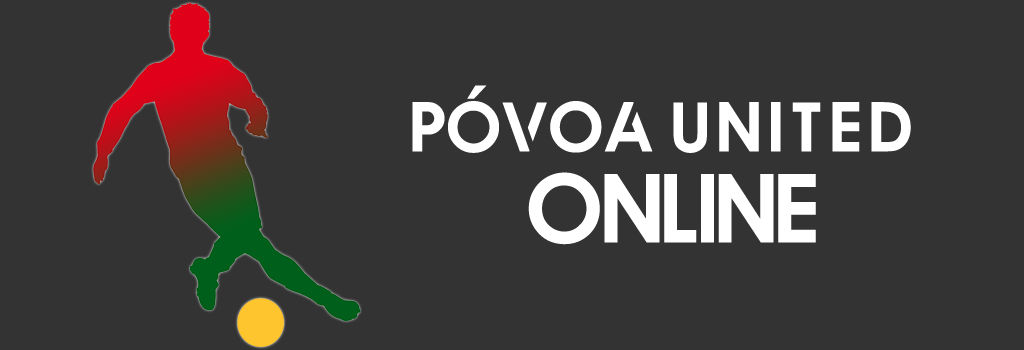
<style>
.page{position:relative;width:1024px;height:350px;background:#333333}
.page>*{position:absolute;margin:0}
.t1{font:72px "Qualy-Bold";letter-spacing:-0.17em;color:#ffffff}
.t2{font:100px "Qualy-Bold";letter-spacing:-0.17em;color:#ffffff}
</style>
<div class="page">
<p class="t1" style="left:412px;top:85px;width:499px;height:68px">P Ó V O A   U  N  i  t  E  D</p>
<p class="t2" style="left:528px;top:172px;width:288px;height:73px">O N L I N E</p>
</div>
